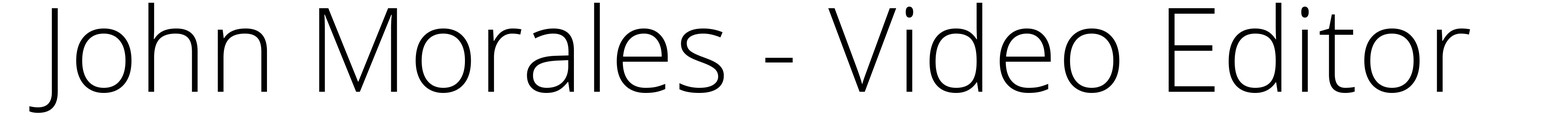
<style>
.page{position:relative;width:1568px;height:114px;background:#ffffff}
.page>*{position:absolute;margin:0}
.t1{font:117.6px "OpenSans-Light";color:#000000}
</style>
<div class="page">
<p class="t1" style="left:29px;top:3px;width:1441px;height:110px">John Morales - Video Editor</p>
</div>
